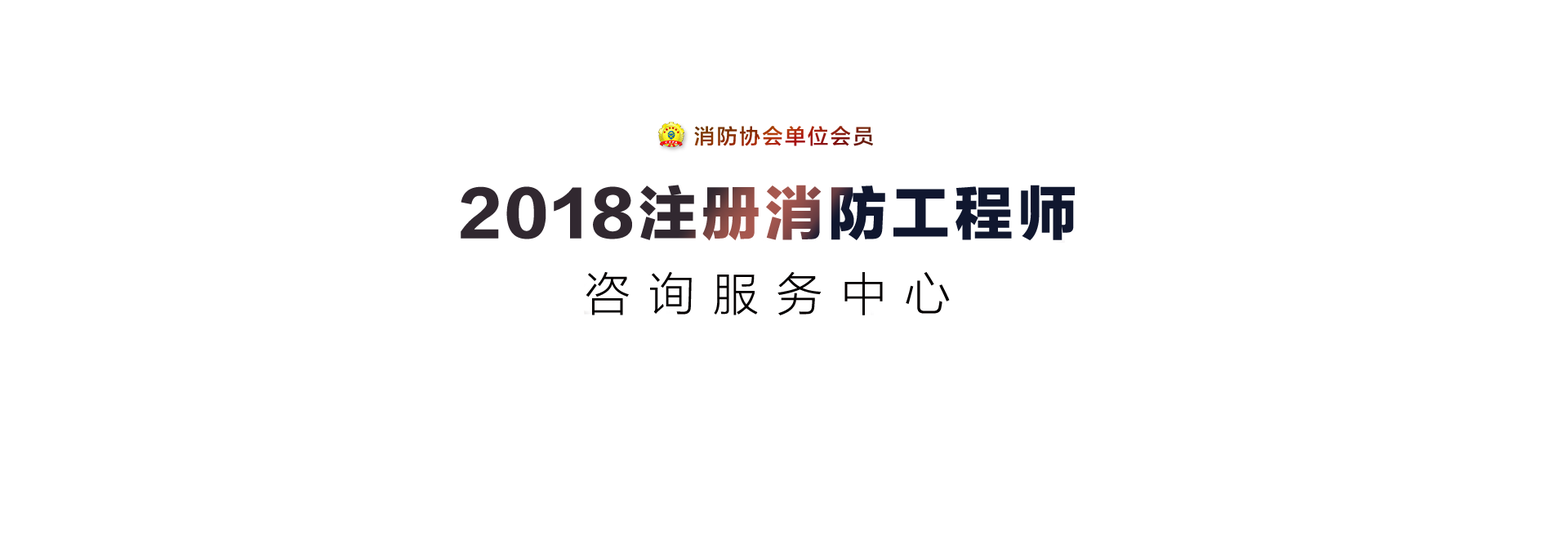
<style>
.page{position:relative;width:1568px;height:536px;background:#ffffff}
.page>*{position:absolute;margin:0}
.t1{font:58.8px "FZLTTHK--GBK1-0";letter-spacing:0.075em;text-transform:uppercase}
.t2{font:45.7px "FZLTXHK--GBK1-0";letter-spacing:0.4em;color:#040000;text-transform:uppercase}
</style>
<div class="page">
<p class="t1" style="left:461px;top:185px;width:614px;height:56px">2018注册消防工程师</p>
<p class="t2" style="left:586px;top:271px;width:364px;height:44px">咨询服务中心</p>
</div>
